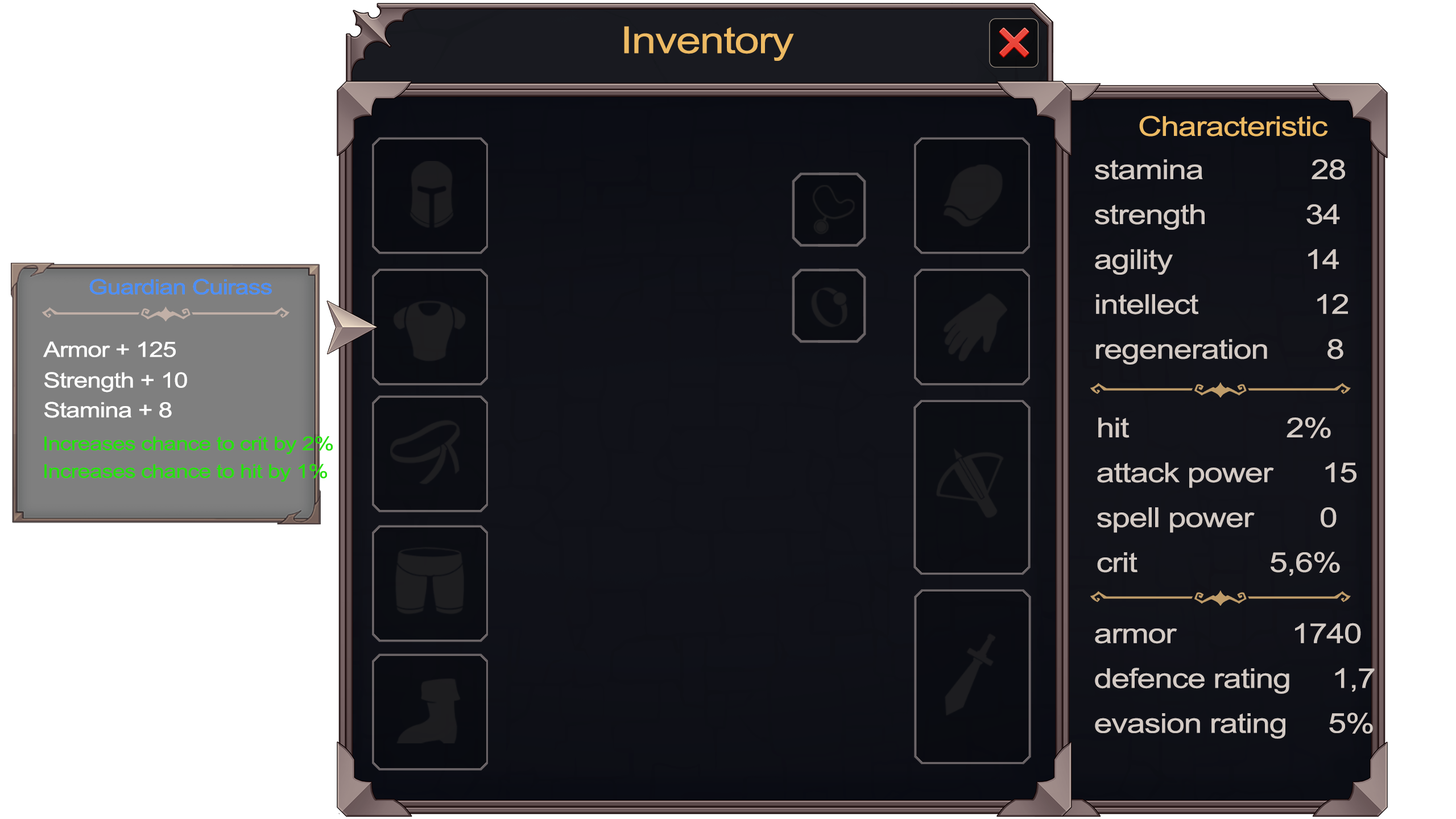
<style>
.page{position:relative;width:1456px;height:819px;background:#ffffff}
.page>*{position:absolute;margin:0}
.t1{font:37px "ArialMT";letter-spacing:-0.025em;color:#edba63;scale:1.2 1}
.t2{font:27.3px "ArialMT";letter-spacing:-0.025em;color:#edba63;scale:1.2 1}
.t3{font:27.3px/22.5px "ArialMT";letter-spacing:-0.025em;color:#d4cbc5;scale:1.2 1}
.t4{font:20.7px "ArialMT";letter-spacing:-0.025em;color:#4a8efd;scale:1.2 1}
.t5{font:21px "ArialMT";letter-spacing:-0.025em;color:#fffffe;scale:1.2 1}
.t6{font:18.9px "ArialMT";letter-spacing:-0.025em;color:#27df0e;scale:1.2 1}
</style>
<div class="page">
<p class="t1" style="left:624px;top:26px;width:170px;height:35px">Inventory</p>
<p class="t2" style="left:1139px;top:115px;width:189px;height:21px">Сharacteristic</p>
<p class="t3" style="left:1095px;top:159px;width:253px;height:206px">stamina             28<br><br>strength            34<br><br>agility                14<br><br>intellect              12<br><br>regeneration       8</p>
<p class="t4" style="left:89px;top:279px;width:183px;height:16px">Guardian Cuirass</p>
<p class="t5" style="left:43px;top:341px;width:133px;height:16px">Armor + 125</p>
<p class="t5" style="left:44px;top:372px;width:143px;height:20px">Strength + 10</p>
<p class="t5" style="left:44px;top:402px;width:128px;height:16px">Stamina + 8</p>
<p class="t3" style="left:1097px;top:417px;width:259px;height:159px">hit                   2%<br><br>attack power      15<br><br>spell power        0<br><br>crit                5,6%</p>
<p class="t6" style="left:44px;top:436px;width:289px;height:18px">Increases chance to crit by 2%</p>
<p class="t6" style="left:44px;top:464px;width:283px;height:18px">Increases chance to hit by 1%</p>
<p class="t3" style="left:1095px;top:623px;width:280px;height:116px">armor              1740<br><br>defence rating     1,7<br><br>evasion rating     5%</p>
</div>
